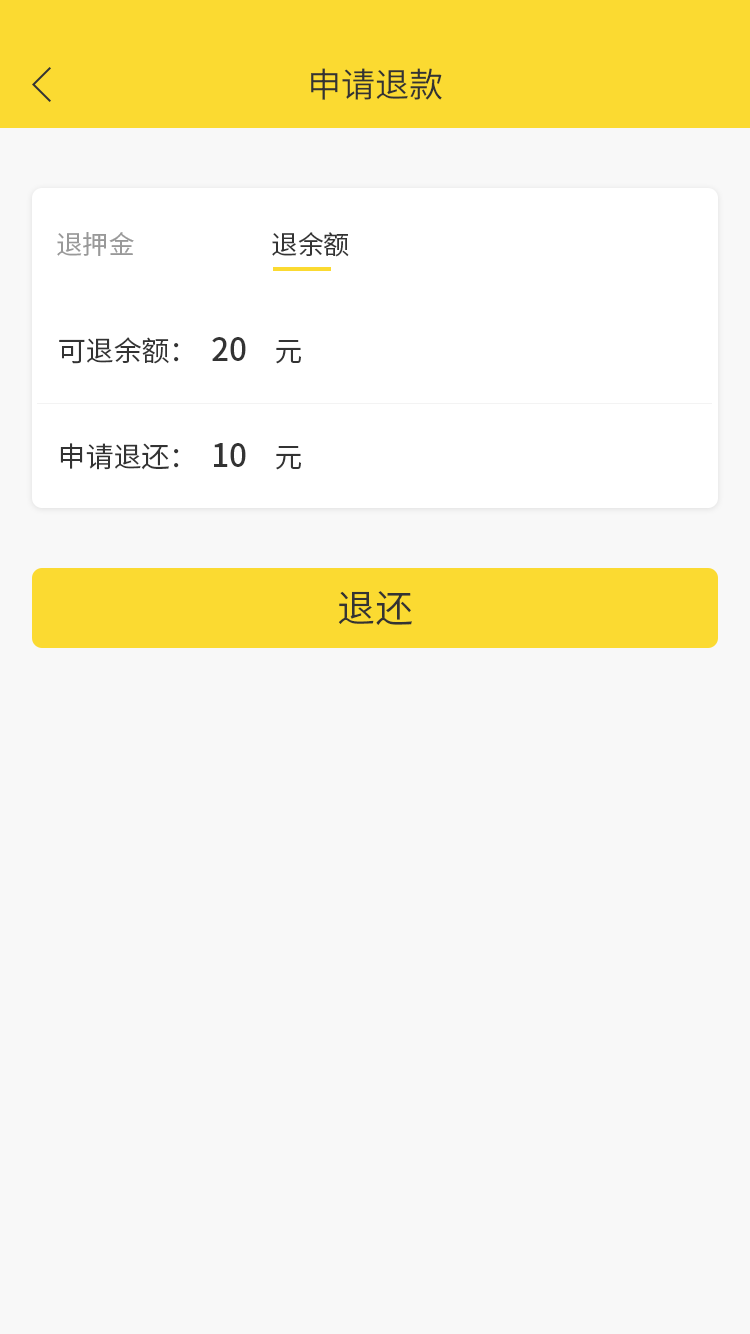
<style>
.page{position:relative;width:750px;height:1334px;background:#f8f8f8}
.page>*{position:absolute;margin:0}
.t1{font:34px "SourceHanSansSC-Normal";color:#333333}
.t2{font:26px "SourceHanSansSC-Regular";color:#999999}
.t3{font:26px "SourceHanSansSC-Regular";color:#333333}
.t4{font:28px "SourceHanSansSC-Normal";color:#333333}
.t5{font:32px "SourceHanSansSC-Medium";color:#333333}
.t6{font:38px "SourceHanSansSC-Normal";color:#333333}
</style>
<div class="page">
<p class="t1" style="left:311px;top:68px;width:131px;height:32px">申请退款</p>
<p class="t2" style="left:57px;top:232px;width:77px;height:24px">退押金</p>
<p class="t3" style="left:272px;top:232px;width:77px;height:25px">退余额</p>
<p class="t4" style="left:59px;top:337px;width:242px;height:27px">可退余额：  <span class="t5">20    </span>元</p>
<p class="t4" style="left:60px;top:443px;width:241px;height:27px">申请退还：  <span class="t5">10    </span>元</p>
<p class="t6" style="left:338px;top:591px;width:74px;height:34px">退还</p>
</div>
